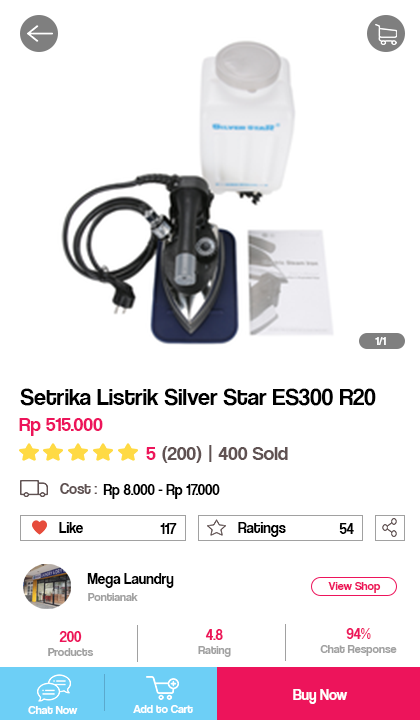
<style>
.page{position:relative;width:420px;height:720px;background:#ffffff}
.page>*{position:absolute;margin:0}
.t1{font:12px "CoolveticaRg-Regular";color:#feffff}
.t2{font:24px "CoolveticaRg-Regular";color:#000000}
.t3{font:20px "CoolveticaRg-Regular";color:#ed145b}
.t4{font:20px "CoolveticaRg-Regular";color:#605252}
.t5{font:15px "CoolveticaRg-Regular";color:#605252}
.t6{font:15px "CoolveticaRg-Regular";color:#000000}
.t7{font:12px "CoolveticaRg-Regular";color:#ed145b}
.t8{font:12px "CoolveticaRg-Regular";color:#a1a1a1}
.t9{font:15px "CoolveticaRg-Regular";color:#ed145b}
.t10{font:15px "CoolveticaRg-Regular";color:#ffffff}
.t11{font:12px "CoolveticaRg-Regular";color:#ffffff}
</style>
<div class="page">
<p class="t1" style="left:375px;top:337px;width:11px;height:8px">1/1</p>
<p class="t2" style="left:20px;top:388px;width:356px;height:18px">Setrika Listrik Silver Star ES300 R20</p>
<p class="t3" style="left:19px;top:418px;width:84px;height:18px">Rp 515.000</p>
<p class="t3" style="left:146px;top:447px;width:10px;height:13px">5</p>
<p class="t4" style="left:162px;top:446px;width:40px;height:17px">(200)</p>
<p class="t4" style="left:209px;top:445px;width:79px;height:17px">| 400 Sold</p>
<p class="t5" style="left:60px;top:483px;width:37px;height:11px">Cost :</p>
<p class="t6" style="left:103px;top:484px;width:117px;height:15px">Rp 8.000 - Rp 17.000</p>
<p class="t6" style="left:59px;top:522px;width:24px;height:11px">Like</p>
<p class="t6" style="left:160px;top:523px;width:17px;height:11px">117</p>
<p class="t6" style="left:238px;top:522px;width:48px;height:15px">Ratings</p>
<p class="t6" style="left:339px;top:523px;width:15px;height:11px">54</p>
<p class="t6" style="left:87px;top:573px;width:87px;height:15px">Mega Laundry</p>
<p class="t7" style="left:328px;top:582px;width:53px;height:11px">View Shop</p>
<p class="t8" style="left:88px;top:593px;width:50px;height:8px">Pontianak</p>
<p class="t8" style="left:198px;top:629px;width:33px;height:28px;text-align:center"><span class="t9">4.8<br></span>Rating</p>
<p class="t8" style="left:320px;top:628px;width:77px;height:28px;text-align:center"><span class="t9">94%<br></span>Chat Response</p>
<p class="t8" style="left:48px;top:631px;width:46px;height:25px;text-align:center"><span class="t9">200<br></span>Products</p>
<p class="t10" style="left:293px;top:689px;width:55px;height:15px">Buy Now</p>
<p class="t11" style="left:28px;top:706px;width:50px;height:8px">Chat Now</p>
<p class="t11" style="left:133px;top:705px;width:60px;height:8px">Add to Cart</p>
</div>
